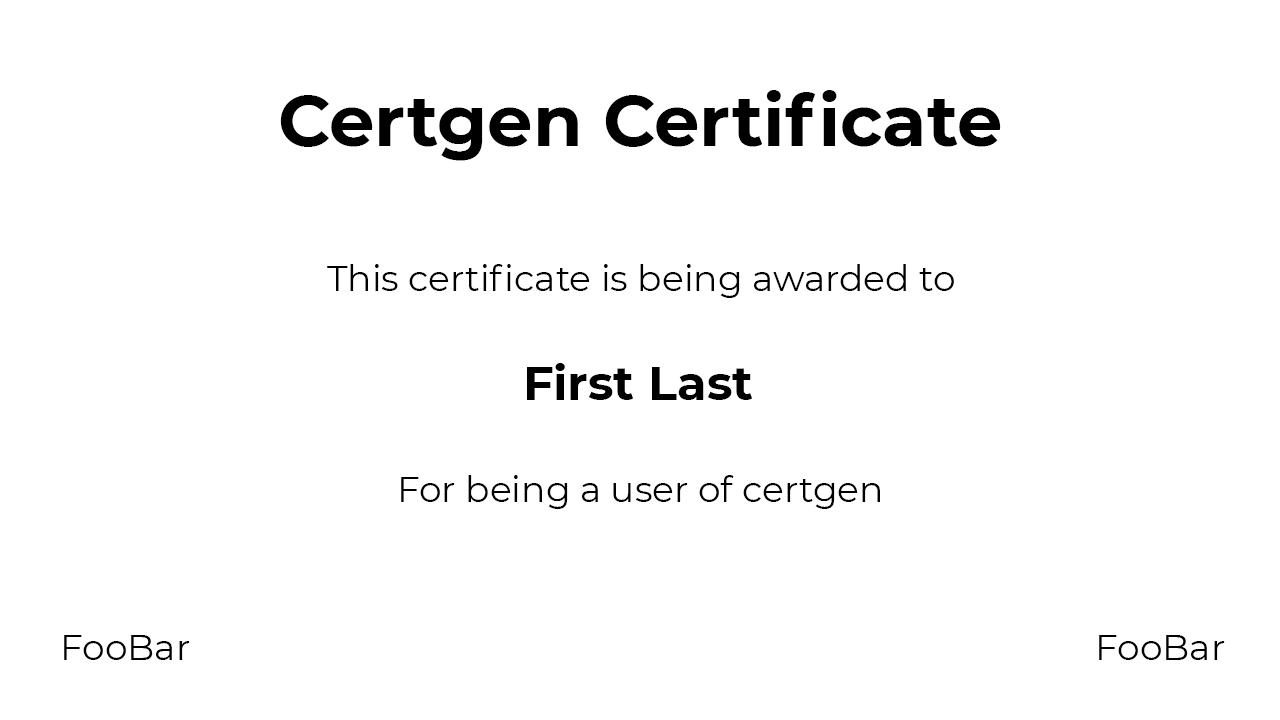
<style>
.page{position:relative;width:1280px;height:720px;background:#ffffff}
.page>*{position:absolute;margin:0}
.t1{font:72px "Montserrat-Bold";color:#000000}
.t2{font:36px "Montserrat-Regular";color:#000000}
.t3{font:48px "Montserrat-Bold";color:#000000}
</style>
<div class="page">
<p class="t1" style="left:280px;top:90px;width:721px;height:71px">Certgen Certificate</p>
<p class="t2" style="left:327px;top:264px;width:627px;height:34px">This certificate is being awarded to</p>
<p class="t3" style="left:527px;top:363px;width:226px;height:37px">First Last</p>
<p class="t2" style="left:401px;top:475px;width:479px;height:34px">For being a user of certgen</p>
<p class="t2" style="left:64px;top:635px;width:126px;height:25px">FooBar</p>
<p class="t2" style="left:1099px;top:635px;width:126px;height:25px">FooBar</p>
</div>
